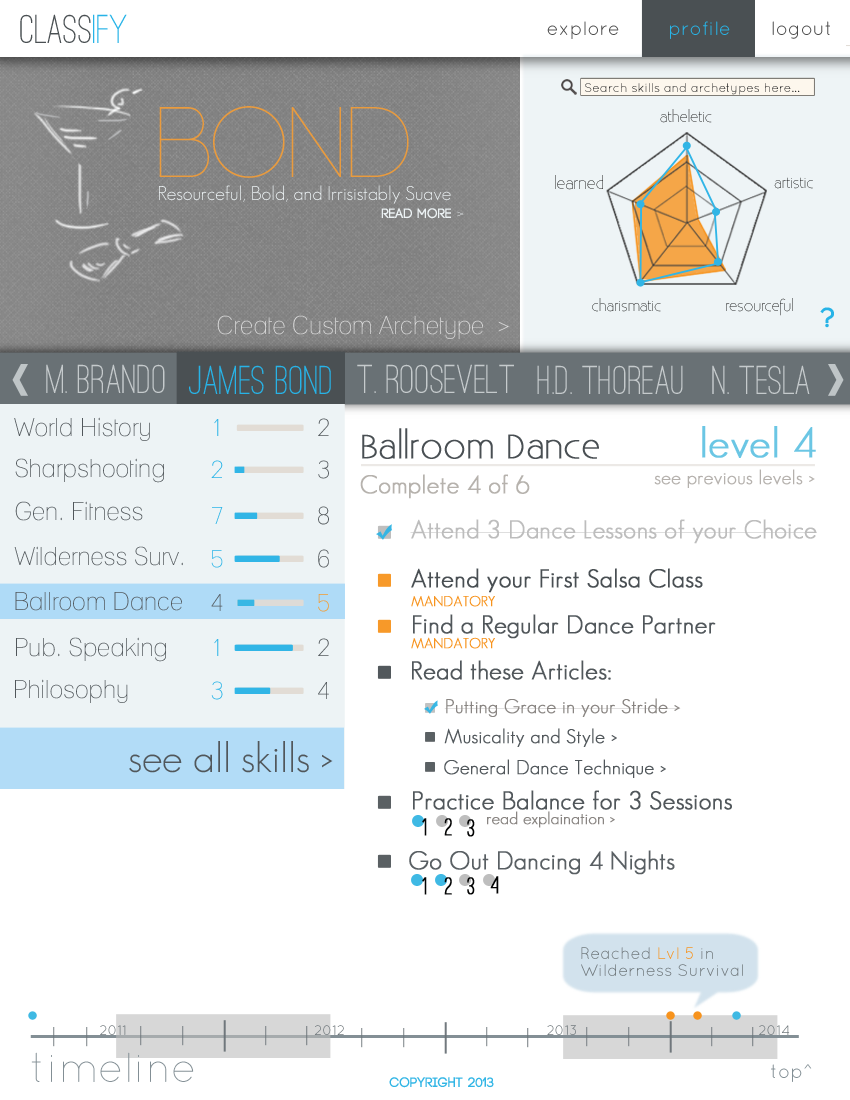
<style>
.page{position:relative;width:850px;height:1100px;background:#ffffff}
.page>*{position:absolute;margin:0}
.t1{font:41.7px "OstrichSans-Medium";color:#4a5053}
.t2{font:41.7px "OstrichSans-Medium";color:#27b3e7}
.t3{font:19.4px "QuicksandBook-Regular";color:#4b4b4b}
.t4{font:19.4px "QuicksandBook-Regular";color:#28b4e7}
.t5{font:19.4px "QuicksandBook-Regular";color:#4c4c4c}
.t6{font:12.5px "QuicksandBook-Regular";color:#212121}
.t7{font:100px "Code-Light";color:#ea9b3d}
.t8{font:14.4px "Existence-Light"}
.t9{font:19.4px "GeosansLight";color:#edf3f5}
.t10{font:15.7px "Existence-Light"}
.t11{font:13.9px "Code-Bold";color:#edf3f5}
.t12{font:13.9px "Existence-Light";color:#edf3f5}
.t13{font:25px "Lane-Narrow";color:#dddddd}
.t14{font:27.8px "Code-Bold";color:#27b3e7}
.t15{font:41.7px "OstrichSans-Medium";color:#c5cacc}
.t16{font:25px "Lane-Narrow";color:#51575b}
.t17{font:25px "Lane-Narrow"}
.t18{font:33.3px "Existence-Light";color:#494f53;font-weight:bold}
.t19{font:41.7px "GeosansLight";color:#6bc6e4;font-weight:bold}
.t20{font:25px "Lane-Narrow";color:#27b3e7}
.t21{font:19.4px "GeosansLight";color:#b5b1ad;font-weight:bold}
.t22{font:25px "GeosansLight";color:#b6b2ad;font-weight:bold}
.t23{font:25px "GeosansLight";color:#bdbdbd;font-weight:bold}
.t24{font:25px "GeosansLight";color:#494f53;font-weight:bold}
.t25{font:13.9px "GeosansLight";color:#f7931d;font-weight:bold}
.t26{font:25px "GeosansLight";color:#51575b;font-weight:bold}
.t27{font:19.4px "GeosansLight";color:#898582;font-weight:bold}
.t28{font:19.4px "GeosansLight";color:#51575b;font-weight:bold}
.t29{font:41.7px "GeosansLight";color:#51575b}
.t30{font:25px "OstrichSans-Medium";color:#020303;font-weight:bold}
.t31{font:16.7px "GeosansLight";color:#898582;font-weight:bold}
.t32{font:25px "GeosansLight";color:#595f63;font-weight:bold}
.t33{font:16.7px/16.7px "QuicksandBook-Regular";color:#6f777b}
.t34{font:16.7px/16.7px "QuicksandBook-Regular";color:#f7931d}
.t35{font:13.9px "QuicksandBook-Regular"}
.t36{font:13.9px "QuicksandBook-Regular";color:#6f777b}
.t37{font:41.7px "QuicksandLight-Regular";color:#838f95}
.t38{font:19.4px "QuicksandBook-Regular";color:#838f95}
.t39{font:13.9px "Code-Bold";color:#31b5e5}
</style>
<div class="page">
<p class="t1" style="left:20px;top:14px;width:107px;height:29px">Class<span class="t2">ify</span></p>
<p class="t3" style="left:547px;top:21px;width:72px;height:18px">explore</p>
<p class="t4" style="left:670px;top:21px;width:60px;height:18px">profile</p>
<p class="t5" style="left:772px;top:21px;width:58px;height:18px">logout</p>
<p class="t6" style="left:585px;top:83px;width:215px;height:12px">Search skills and archetypes here...</p>
<p class="t7" style="left:159px;top:106px;width:250px;height:72px">BOND</p>
<p class="t8" style="left:660px;top:109px;width:52px;height:14px">atheletic</p>
<p class="t9" style="left:159px;top:185px;width:292px;height:19px">Resourceful, Bold, and Irrisistably Suave</p>
<p class="t10" style="left:555px;top:175px;width:48px;height:15px">learned</p>
<p class="t8" style="left:774px;top:177px;width:39px;height:12px">artistic</p>
<p class="t11" style="left:381px;top:208px;width:83px;height:11px">read more <span class="t12">&gt;</span></p>
<p class="t8" style="left:592px;top:298px;width:69px;height:14px">charismatic</p>
<p class="t8" style="left:726px;top:298px;width:67px;height:18px">resourceful</p>
<p class="t13" style="left:217px;top:315px;width:292px;height:24px">Create Custom Archetype  &gt;</p>
<p class="t14" style="left:820px;top:307px;width:14px;height:21px">?</p>
<p class="t15" style="left:46px;top:364px;width:119px;height:29px">M. Brando</p>
<p class="t2" style="left:189px;top:365px;width:142px;height:29px">James Bond</p>
<p class="t15" style="left:357px;top:364px;width:157px;height:29px">T. RooseVelt</p>
<p class="t15" style="left:537px;top:365px;width:146px;height:29px">H.D. Thoreau</p>
<p class="t15" style="left:712px;top:365px;width:98px;height:29px">N. Tesla</p>
<p class="t16" style="left:14px;top:417px;width:136px;height:24px">World History</p>
<p class="t17" style="left:214px;top:419px;width:5px;height:17px">1</p>
<p class="t16" style="left:318px;top:418px;width:11px;height:18px">2</p>
<p class="t18" style="left:362px;top:428px;width:237px;height:31px">Ballroom Dance</p>
<p class="t19" style="left:702px;top:426px;width:114px;height:32px">level 4</p>
<p class="t16" style="left:15px;top:458px;width:149px;height:25px">Sharpshooting</p>
<p class="t20" style="left:211px;top:460px;width:12px;height:18px">2</p>
<p class="t16" style="left:318px;top:460px;width:11px;height:19px">3</p>
<p class="t21" style="left:654px;top:469px;width:161px;height:19px">see previous levels &gt;</p>
<p class="t22" style="left:360px;top:474px;width:170px;height:25px">Complete 4 of 6</p>
<p class="t16" style="left:15px;top:501px;width:128px;height:20px">Gen. Fitness</p>
<p class="t17" style="left:212px;top:507px;width:11px;height:17px">7</p>
<p class="t16" style="left:318px;top:506px;width:11px;height:19px">8</p>
<p class="t23" style="left:410px;top:519px;width:407px;height:25px">Attend 3 Dance Lessons of your Choice</p>
<p class="t16" style="left:14px;top:546px;width:169px;height:20px">Wilderness Surv.</p>
<p class="t17" style="left:211px;top:550px;width:12px;height:18px">5</p>
<p class="t17" style="left:318px;top:549px;width:11px;height:19px">6</p>
<p class="t24" style="left:411px;top:568px;width:292px;height:25px">Attend your First Salsa Class</p>
<p class="t16" style="left:15px;top:592px;width:167px;height:19px">Ballroom Dance</p>
<p class="t17" style="left:211px;top:594px;width:12px;height:17px">4</p>
<p class="t17" style="left:318px;top:594px;width:11px;height:18px">5</p>
<p class="t25" style="left:411px;top:595px;width:84px;height:12px">MANDATORY</p>
<p class="t26" style="left:413px;top:614px;width:303px;height:25px">Find a Regular Dance Partner</p>
<p class="t16" style="left:16px;top:637px;width:150px;height:25px">Pub. Speaking</p>
<p class="t17" style="left:214px;top:639px;width:5px;height:17px">1</p>
<p class="t16" style="left:318px;top:638px;width:11px;height:18px">2</p>
<p class="t25" style="left:411px;top:637px;width:84px;height:12px">MANDATORY</p>
<p class="t26" style="left:412px;top:660px;width:199px;height:20px">Read these Articles:</p>
<p class="t16" style="left:15px;top:679px;width:113px;height:24px">Philosophy</p>
<p class="t17" style="left:211px;top:681px;width:12px;height:19px">3</p>
<p class="t16" style="left:318px;top:682px;width:11px;height:17px">4</p>
<p class="t27" style="left:444px;top:698px;width:237px;height:19px">Putting Grace in your Stride &gt;</p>
<p class="t28" style="left:444px;top:728px;width:173px;height:19px">Musicality and Style &gt;</p>
<p class="t29" style="left:129px;top:741px;width:204px;height:32px">see all skills &gt;</p>
<p class="t28" style="left:444px;top:759px;width:222px;height:19px">General Dance Technique &gt;</p>
<p class="t26" style="left:413px;top:790px;width:319px;height:20px">Practice Balance for 3 Sessions</p>
<p class="t30" style="left:422px;top:818px;width:5px;height:18px">1</p>
<p class="t30" style="left:444px;top:818px;width:8px;height:18px">2</p>
<p class="t30" style="left:467px;top:819px;width:8px;height:18px">3</p>
<p class="t31" style="left:487px;top:811px;width:128px;height:17px">read explaination &gt;</p>
<p class="t32" style="left:409px;top:850px;width:266px;height:25px">Go Out Dancing 4 Nights</p>
<p class="t30" style="left:422px;top:877px;width:5px;height:18px">1</p>
<p class="t30" style="left:444px;top:877px;width:8px;height:18px">2</p>
<p class="t30" style="left:467px;top:877px;width:8px;height:18px">3</p>
<p class="t30" style="left:490px;top:876px;width:9px;height:18px">4</p>
<p class="t33" style="left:581px;top:947px;width:162px;height:29px">Reached <span class="t34">Lvl 5</span> in <br>Wilderness Survival</p>
<p class="t35" style="left:100px;top:1025px;width:26px;height:10px">2011</p>
<p class="t36" style="left:314px;top:1025px;width:30px;height:10px">2012</p>
<p class="t36" style="left:547px;top:1025px;width:29px;height:10px">2013</p>
<p class="t36" style="left:759px;top:1025px;width:31px;height:10px">2014</p>
<p class="t37" style="left:31px;top:1052px;width:163px;height:30px">timeline</p>
<p class="t38" style="left:771px;top:1064px;width:41px;height:18px">top^</p>
<p class="t39" style="left:389px;top:1077px;width:105px;height:11px">copyright 2013</p>
</div>
